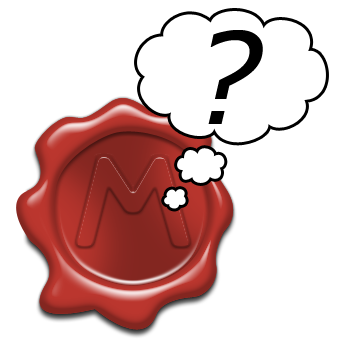
<style>
.page{position:relative;width:345px;height:345px;background:#ffffff}
.page>*{position:absolute;margin:0}
.t1{font:127.3px "Verdana-Italic";color:#000000}
</style>
<div class="page">
<p class="t1" style="left:208px;top:30px;width:55px;height:94px">?</p>
</div>
